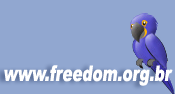
<style>
.page{position:relative;width:175px;height:94px;background:#91a7d0}
.page>*{position:absolute;margin:0}
.t1{font:21.6px "Arial-Black";color:#ffffff;font-style:italic;scale:0.69 1}
</style>
<div class="page">
<p class="t1" style="left:4px;top:65px;width:169px;height:21px">www.freedom.org.br</p>
</div>
